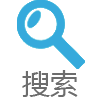
<style>
.page{position:relative;width:100px;height:100px;background:#ffffff}
.page>*{position:absolute;margin:0}
.t1{font:27.8px "MicrosoftYaHei";color:#6d6d6d}
</style>
<div class="page">
<p class="t1" style="left:22px;top:70px;width:56px;height:27px">搜索</p>
</div>
